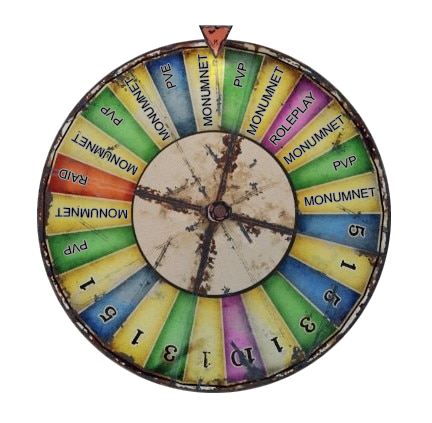
<style>
.page{position:relative;width:432px;height:423px;background:#ffffff}
.page>*{position:absolute;margin:0}
.t1{font:12px "ArialMT";color:#000000;scale:1.03 1}
</style>
<div class="page">
<p class="t1" style="left:197px;top:54px;width:16px;height:72px;rotate:-95deg">MONUMNET</p>
<p class="t1" style="left:160px;top:63px;width:17px;height:26px;rotate:-108deg">PVE</p>
<p class="t1" style="left:233px;top:62px;width:14px;height:26px;rotate:-76deg">PVP</p>
<p class="t1" style="left:246px;top:65px;width:38px;height:71px;rotate:-65deg">MONUMNET</p>
<p class="t1" style="left:124px;top:78px;width:47px;height:63px;rotate:-123deg">MONUMNET</p>
<p class="t1" style="left:269px;top:91px;width:46px;height:55px;rotate:-50deg">ROLEPLAY</p>
<p class="t1" style="left:100px;top:107px;width:23px;height:19px;rotate:-139deg">PVP</p>
<p class="t1" style="left:283px;top:114px;width:61px;height:51px;rotate:-37deg">MONUMNET</p>
<p class="t1" style="left:71px;top:133px;width:67px;height:43px;rotate:-151deg">MONUMNET</p>
<p class="t1" style="left:332px;top:155px;width:24px;height:16px;rotate:-20deg">PVP</p>
<p class="t1" style="left:59px;top:169px;width:29px;height:16px;rotate:-164deg">RAID</p>
<p class="t1" style="left:304px;top:187px;width:72px;height:19px;rotate:-8deg">MONUMNET</p>
<p class="t1" style="left:55px;top:207px;width:73px;height:12px;rotate:-178deg">MONUMNET</p>
<p class="t1" style="left:64px;top:240px;width:24px;height:15px;rotate:164deg">PVP</p>
</div>
